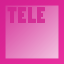
<style>
.page{position:relative;width:64px;height:64px}
.page>*{position:absolute;margin:0}
.t1{font:20.8px "PoplarStd";color:#d11e8e}
</style>
<div class="page">
<p class="t1" style="left:7px;top:7px;width:38px;height:16px;opacity:0.8">TE LE</p>
</div>
